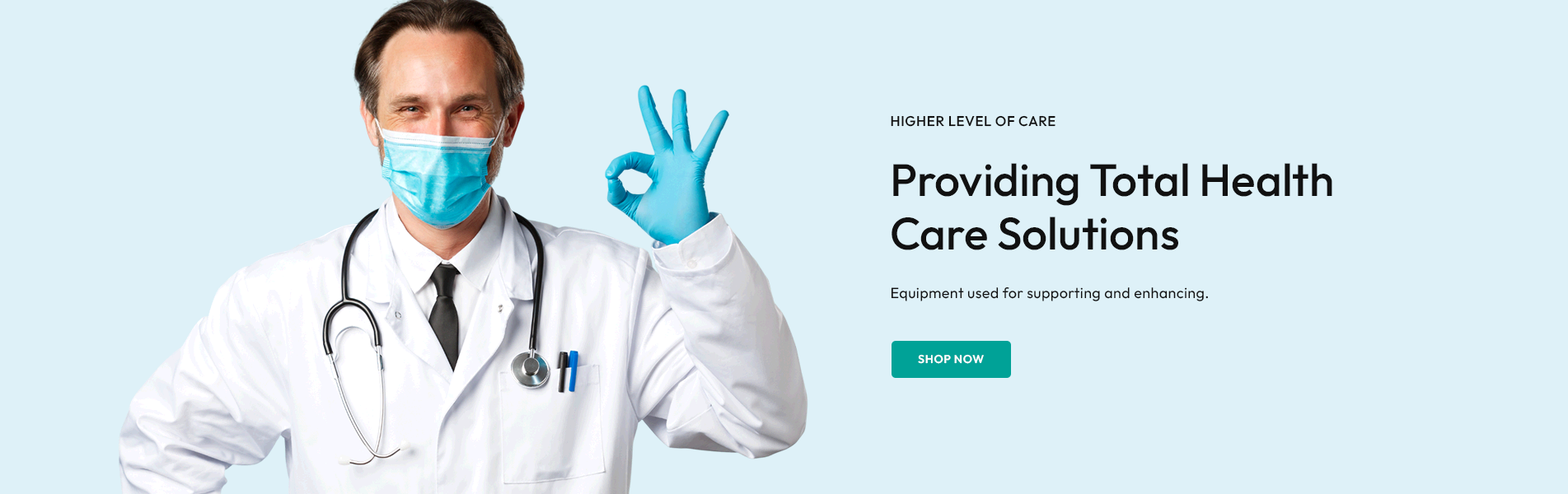
<style>
.page{position:relative;width:1568px;height:494px;background:#def1f8}
.page>*{position:absolute;margin:0}
.t1{font:14px "Outfit-Medium";letter-spacing:0.035em;color:#111111;text-transform:uppercase}
.t2{font:45.3px/53.6px "Outfit-Medium";color:#111111}
.t3{font:14.8px "Outfit-Regular";letter-spacing:0.02em;color:#111111}
.t4{font:11.5px "Outfit-SemiBold";letter-spacing:0.05em;color:#ffffff;text-transform:uppercase}
</style>
<div class="page">
<p class="t1" style="left:891px;top:115px;width:164px;height:12px">HIGHER LEVEL OF CARE</p>
<p class="t2" style="left:892px;top:163px;width:440px;height:87px">Providing Total Health<br>Care Solutions</p>
<p class="t3" style="left:891px;top:287px;width:317px;height:15px">Equipment used for supporting and enhancing.</p>
<p class="t4" style="left:918px;top:354px;width:66px;height:10px">Shop Now</p>
</div>
